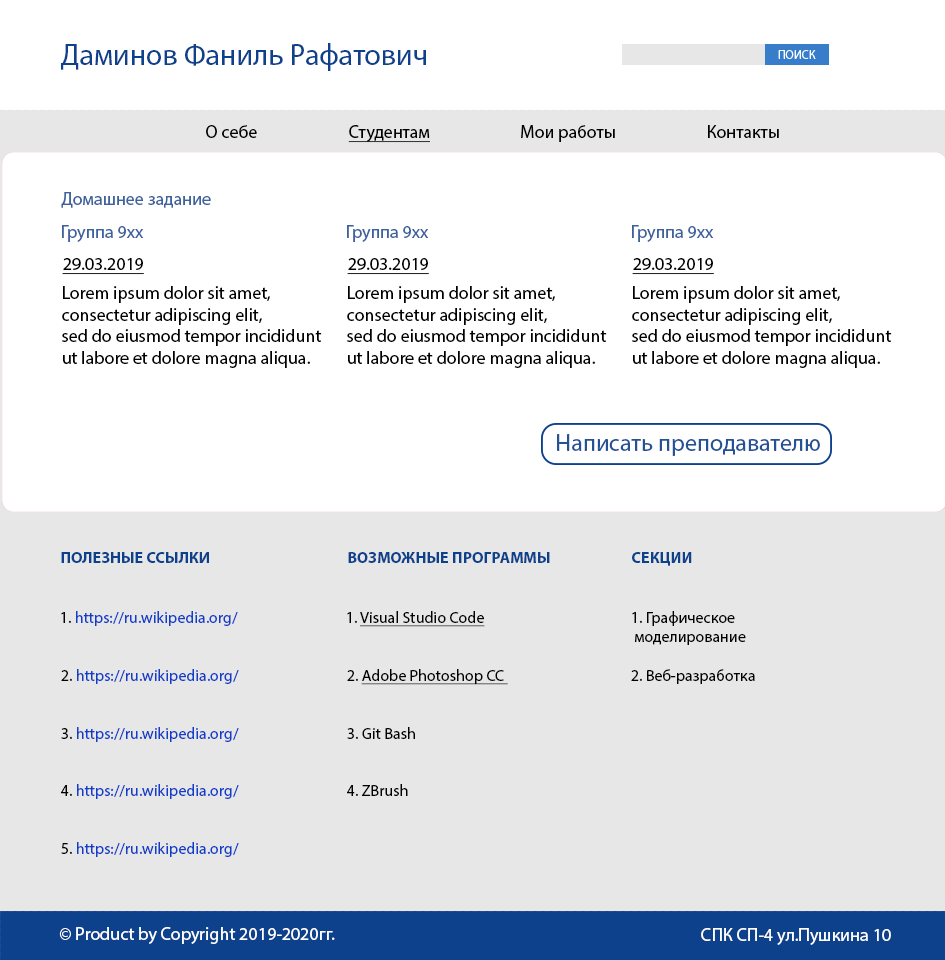
<style>
.page{position:relative;width:945px;height:960px;background:#ffffff}
.page>*{position:absolute;margin:0}
.t1{font:30px "MyriadPro-Regular";color:#0d418c}
.t2{font:18px "MyriadPro-Regular";color:#010101}
.t3{font:18px "MyriadPro-Regular";color:#010101;text-decoration:underline}
.t4{font:18px "MyriadPro-Regular";color:#000000}
.t5{font:18px "MyriadPro-Regular";color:#3d619d}
.t6{font:18px "MyriadPro-Regular";color:#000000;text-decoration:underline}
.t7{font:24px "MyriadPro-Regular";color:#255195}
.t8{font:16px "MyriadPro-Bold";color:#0d418c;text-transform:uppercase}
.t9{font:16px "MyriadPro-Regular";color:#103ec8}
.t10{font:16px "MyriadPro-Regular";color:#010101}
.t11{font:16px "MyriadPro-Regular";color:#010101;text-decoration:underline}
.t12{font:18px "MyriadPro-Regular";color:#ffffff}
</style>
<div class="page">
<p class="t1" style="left:61px;top:43px;width:365px;height:28px">Даминов Фаниль Рафатович</p>
<p class="t2" style="left:206px;top:125px;width:51px;height:13px">О себе</p>
<p class="t3" style="left:348px;top:125px;width:82px;height:18px">Студентам</p>
<p class="t2" style="left:521px;top:125px;width:94px;height:17px">Мои работы</p>
<p class="t4" style="left:708px;top:125px;width:71px;height:13px">Контакты</p>
<p class="t5" style="left:61px;top:192px;width:150px;height:16px">Домашнее задание</p>
<p class="t5" style="left:62px;top:225px;width:82px;height:17px">Группа 9xx</p>
<p class="t5" style="left:347px;top:225px;width:82px;height:17px">Группа 9xx</p>
<p class="t5" style="left:632px;top:225px;width:82px;height:17px">Группа 9xx</p>
<p class="t6" style="left:62px;top:258px;width:82px;height:17px">29.03.2019</p>
<p class="t6" style="left:347px;top:258px;width:82px;height:17px">29.03.2019</p>
<p class="t6" style="left:632px;top:258px;width:82px;height:17px">29.03.2019</p>
<p class="t4" style="left:62px;top:286px;width:260px;height:82px">Lorem ipsum dolor sit amet, <br>consectetur adipiscing elit, <br>sed do eiusmod tempor incididunt <br>ut labore et dolore magna aliqua.</p>
<p class="t4" style="left:347px;top:286px;width:260px;height:82px">Lorem ipsum dolor sit amet, <br>consectetur adipiscing elit, <br>sed do eiusmod tempor incididunt <br>ut labore et dolore magna aliqua.</p>
<p class="t4" style="left:632px;top:286px;width:260px;height:82px">Lorem ipsum dolor sit amet, <br>consectetur adipiscing elit, <br>sed do eiusmod tempor incididunt <br>ut labore et dolore magna aliqua.</p>
<p class="t7" style="left:557px;top:434px;width:263px;height:22px">Написать преподавателю</p>
<p class="t8" style="left:61px;top:552px;width:148px;height:11px">пОЛЕЗНЫЕ ССЫЛКИ</p>
<p class="t8" style="left:348px;top:552px;width:202px;height:11px">возможные программы</p>
<p class="t8" style="left:632px;top:552px;width:60px;height:14px">секции</p>
<p class="t9" style="left:61px;top:611px;width:177px;height:15px"><span class="t10">1. </span>https://ru.wikipedia.org/</p>
<p class="t11" style="left:347px;top:611px;width:138px;height:16px"><span class="t10">1. </span>Visual Studio Code</p>
<p class="t10" style="left:632px;top:611px;width:114px;height:34px">1. Графическое<br> моделирование</p>
<p class="t9" style="left:61px;top:669px;width:178px;height:15px"><span class="t10">2. </span>https://ru.wikipedia.org/</p>
<p class="t11" style="left:347px;top:669px;width:161px;height:16px"><span class="t10">2. </span>Adobe Photoshop CC</p>
<p class="t10" style="left:631px;top:669px;width:124px;height:15px">2. Веб-разработка</p>
<p class="t9" style="left:61px;top:727px;width:178px;height:15px"><span class="t10">3. </span>https://ru.wikipedia.org/</p>
<p class="t10" style="left:347px;top:727px;width:68px;height:12px">3. Git Bash</p>
<p class="t9" style="left:61px;top:784px;width:178px;height:15px"><span class="t10">4. </span>https://ru.wikipedia.org/</p>
<p class="t10" style="left:347px;top:784px;width:61px;height:12px">4. ZBrush</p>
<p class="t9" style="left:61px;top:842px;width:178px;height:15px"><span class="t10">5. </span>https://ru.wikipedia.org/</p>
<p class="t12" style="left:59px;top:927px;width:276px;height:17px">© Product by Copyright 2019-2020гг.</p>
<p class="t12" style="left:701px;top:928px;width:190px;height:17px">СПК СП-4 ул.Пушкина 10</p>
</div>
